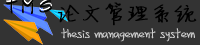
<style>
.page{position:relative;width:200px;height:45px;background:#333333}
.page>*{position:absolute;margin:0}
.t1{font:24px "FZJLJW--GB1-0";letter-spacing:-0.05em;color:#000000;font-weight:bold}
.t2{font:18px "FZJLJW--GB1-0";letter-spacing:-0.05em;color:#cccccc;font-weight:bold}
</style>
<div class="page">
<p class="t1" style="left:58px;top:2px;width:139px;height:24px">论文管理系统</p>
<p class="t2" style="left:61px;top:28px;width:134px;height:14px">thesis management system</p>
</div>
